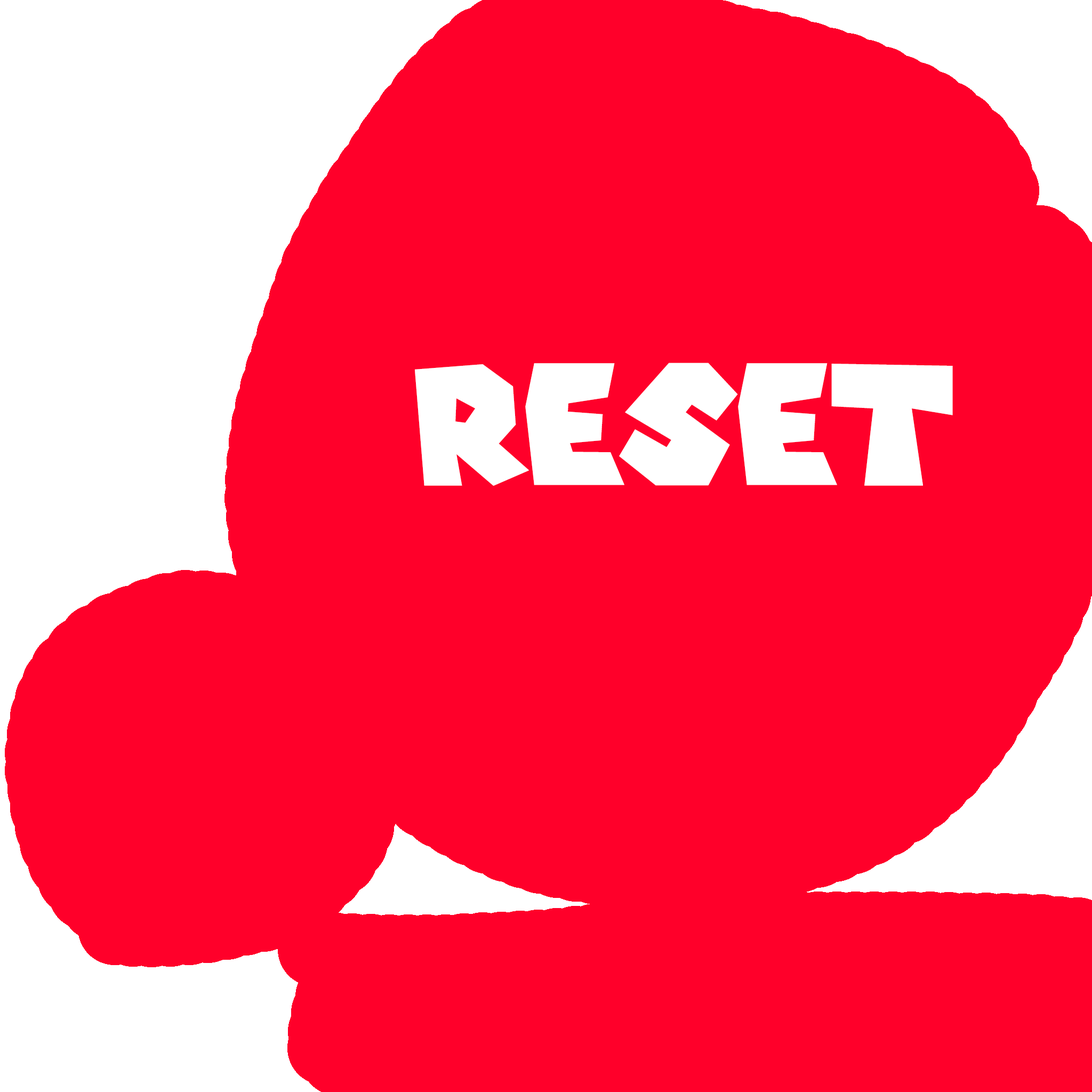
<style>
.page{position:relative;width:1092px;height:1092px;background:#ff002a}
.page>*{position:absolute;margin:0}
.t1{font:164px "SuperMarioGalaxy";color:#ffffff}
</style>
<div class="page">
<p class="t1" style="left:415px;top:363px;width:538px;height:123px">Reset</p>
</div>
